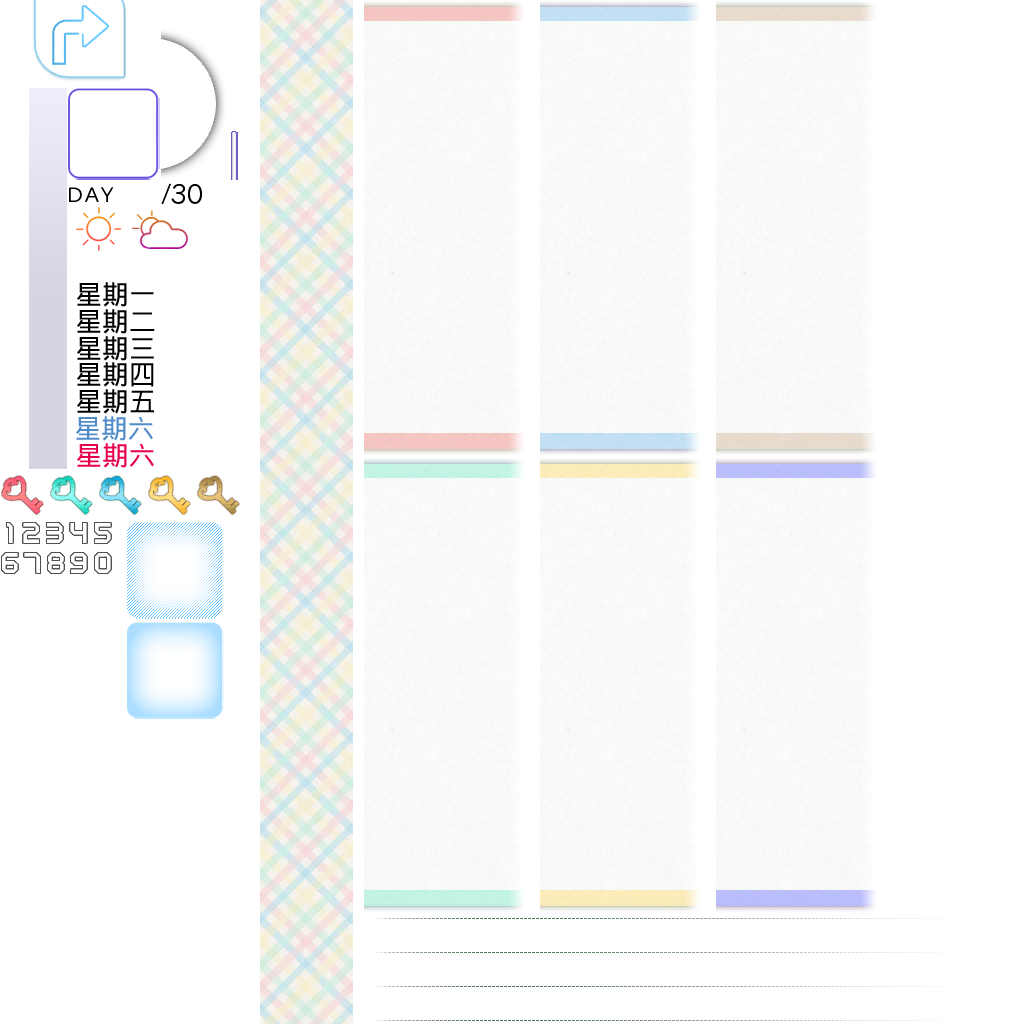
<style>
.page{position:relative;width:1024px;height:1024px;background:#ffffff}
.page>*{position:absolute;margin:0}
.t1{font:26.7px/26.7px "WenQuanYiMicroHeiMono";color:#000000}
.t2{font:26.7px "WenQuanYiMicroHeiMono";color:#4f8bc8}
.t3{font:26.7px "WenQuanYiMicroHeiMono";color:#e6004f}
</style>
<div class="page">
<p class="t1" style="left:77px;top:282px;width:78px;height:132px">星期一<br>星期二<br>星期三<br>星期四<br>星期五</p>
<p class="t2" style="left:76px;top:416px;width:77px;height:25px">星期六</p>
<p class="t3" style="left:77px;top:443px;width:77px;height:25px">星期六</p>
</div>
